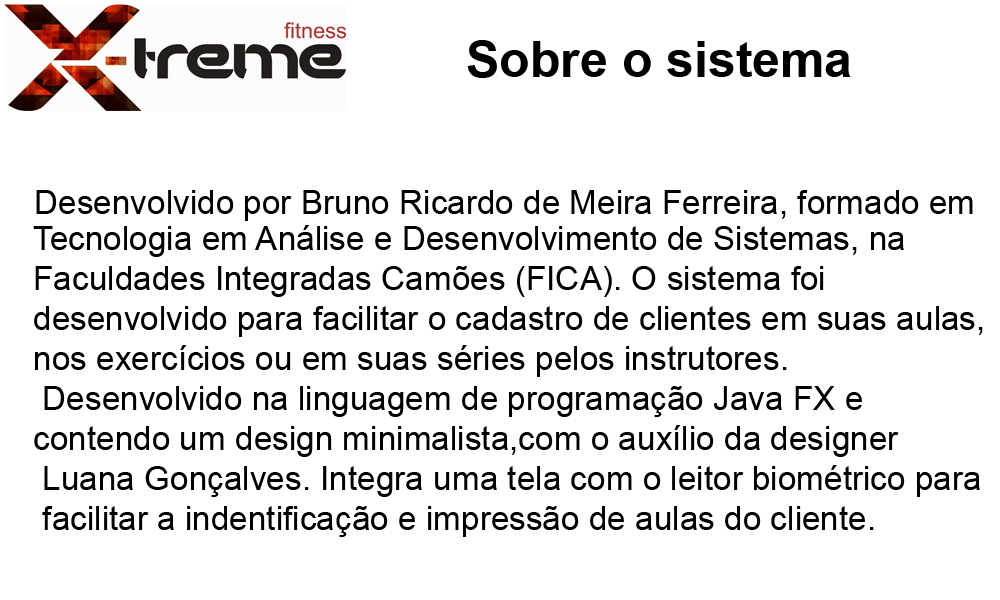
<style>
.page{position:relative;width:1000px;height:600px;background:#ffffff}
.page>*{position:absolute;margin:0}
.t1{font:12px "Arial-BoldMT";color:#000000}
.t2{font:33.3px "ArialMT";color:#000000}
</style>
<div class="page">
<p class="t1" style="left:467px;top:40px;width:384px;height:38px">Sobre o sistema</p>
<p class="t2" style="left:33px;top:225px;width:950px;height:312px">Tecnologia em Análise e Desenvolvimento de Sistemas, na <br>Faculdades Integradas Camões (FICA). O sistema foi <br>desenvolvido para facilitar o cadastro de clientes em suas aulas,<br>nos exercícios ou em suas séries pelos instrutores.<br> Desenvolvido na linguagem de programação Java FX e <br>contendo um design minimalista,com o auxílio da designer<br> Luana Gonçalves. Integra uma tela com o leitor biométrico para<br> facilitar a indentificação e impressão de aulas do cliente.</p>
</div>
